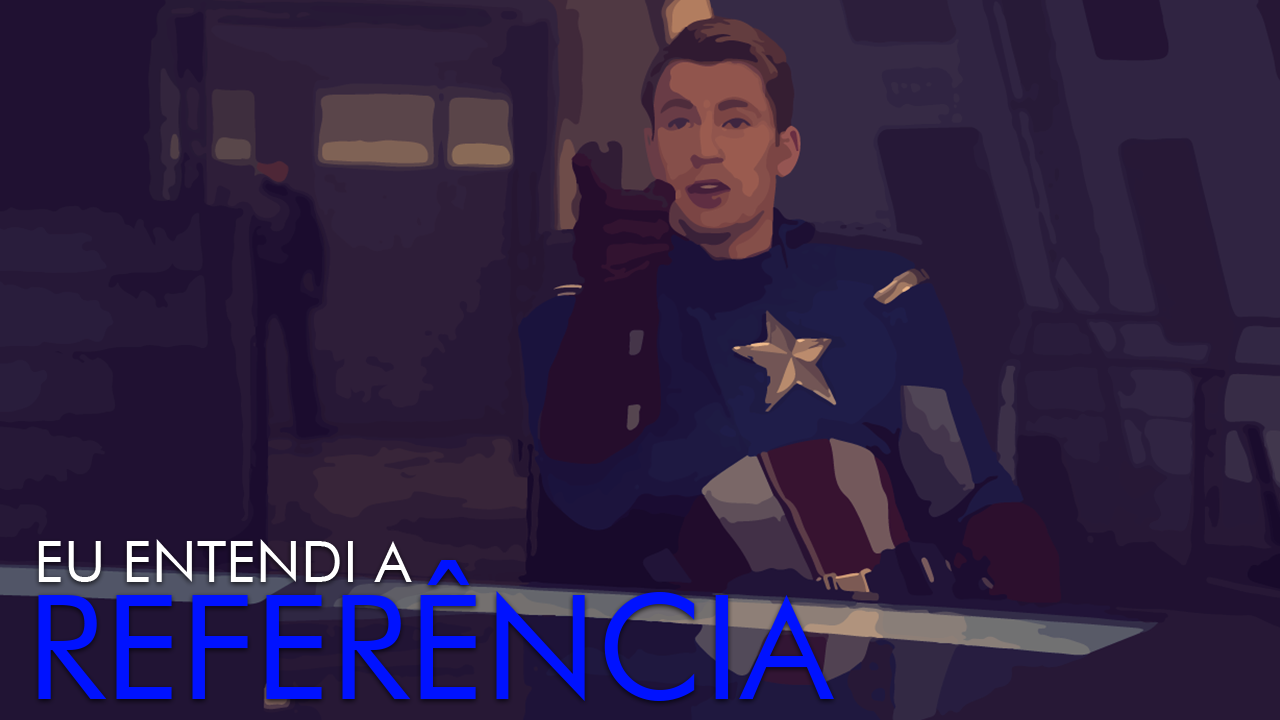
<style>
.page{position:relative;width:1280px;height:720px}
.page>*{position:absolute;margin:0}
.t1{font:57.7px "FuturaBT-Book";color:#ffffff}
.t2{font:145.8px "FuturaBT-Book";color:#0012ff}
</style>
<div class="page">
<p class="t1" style="left:38px;top:539px;width:374px;height:43px">EU ENTENDI A</p>
<p class="t2" style="left:38px;top:560px;width:796px;height:141px">REFERÊNCIA</p>
</div>
